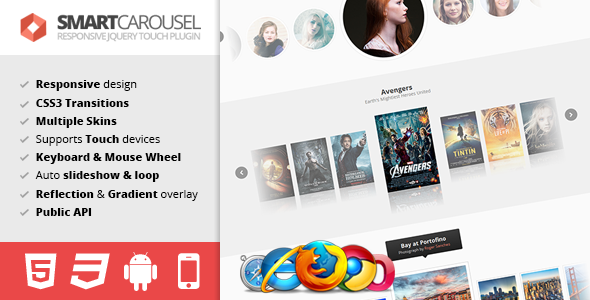
<style>
.page{position:relative;width:590px;height:300px}
.page>*{position:absolute;margin:0}
.t1{font:11px "OpenSans-Extrabold";color:#000000}
.t2{font:11px "OpenSans";color:#000000}
</style>
<div class="page">
<p class="t1" style="left:35px;top:80px;width:163px;height:136px">Responsive <span class="t2">design<br></span>CSS3 Transitions<br>Multiple Skins<br><span class="t2">Supports </span>Touch<span class="t2"> devices<br></span>Keyboard &amp; Mouse Wheel<br><span class="t2">Auto </span>slideshow &amp; loop<br>Reflection <span class="t2">&amp;</span> Gradient <span class="t2">overlay<br></span>Public API</p>
</div>
